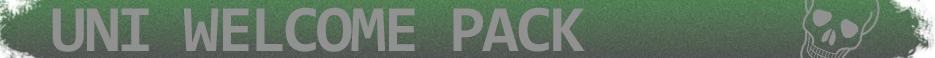
<style>
.page{position:relative;width:935px;height:58px}
.page>*{position:absolute;margin:0}
.t1{font:66.7px "Consolas-Bold";letter-spacing:-0.05em;color:#929191;text-transform:uppercase}
</style>
<div class="page">
<p class="t1" style="left:52px;top:7px;width:533px;height:45px">uni welcome pack</p>
</div>
